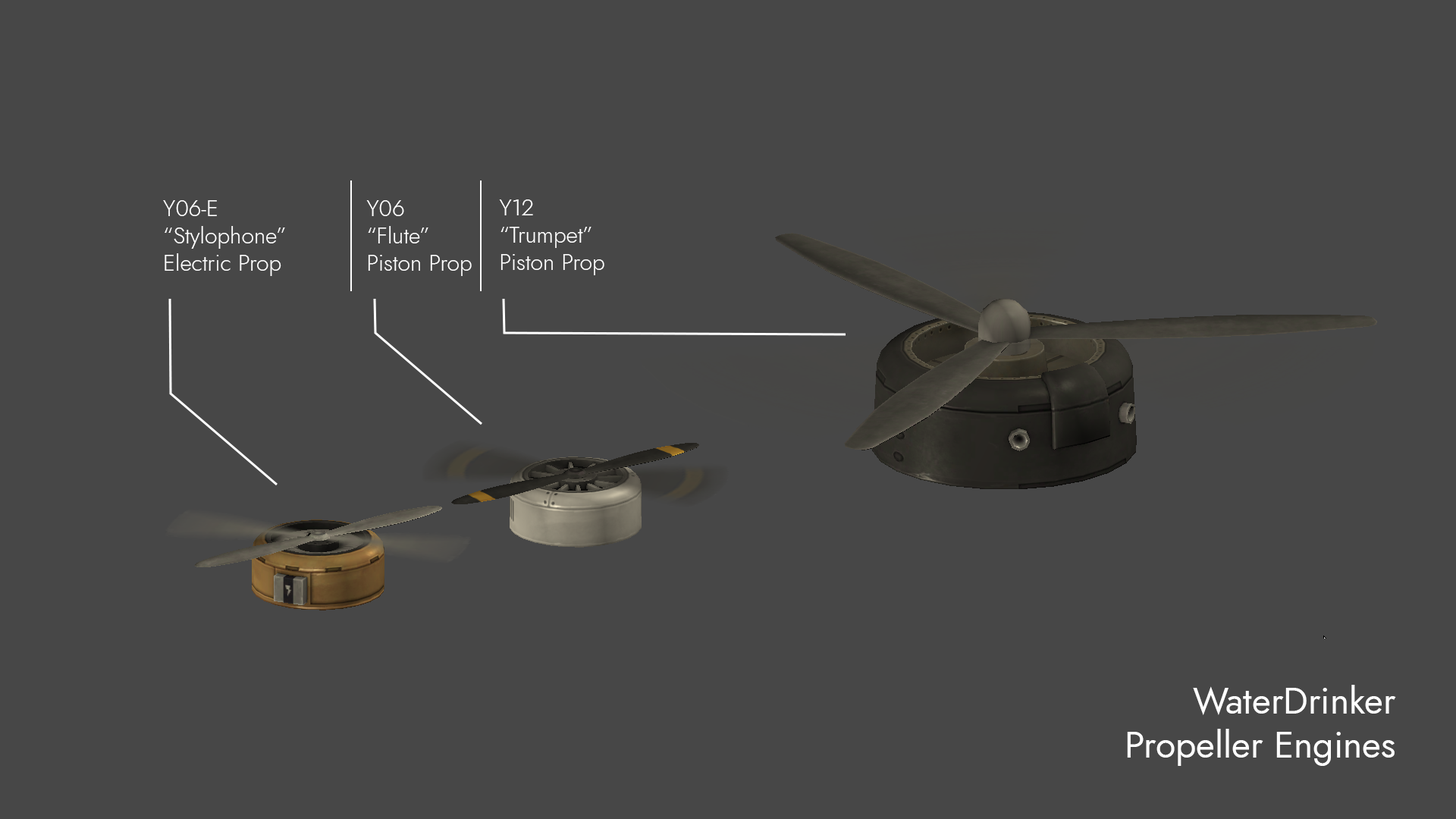
<style>
.page{position:relative;width:1456px;height:819px;background:#474747}
.page>*{position:absolute;margin:0}
.t1{font:22.7px "Renner-it-Light";color:#ffffff}
.t2{font:36.4px "Renner-it-Book";color:#ffffff}
</style>
<div class="page">
<p class="t1" style="left:163px;top:200px;width:122px;height:76px">Y06-E<br>“Stylophone”<br>Electric Prop</p>
<p class="t1" style="left:366px;top:200px;width:106px;height:76px">Y06<br>“Flute”<br>Piston Prop</p>
<p class="t1" style="left:499px;top:199px;width:105px;height:76px">Y12<br>“Trumpet”<br>Piston Prop</p>
<p class="t2" style="left:1127px;top:685px;width:269px;height:81px;text-align:right">WaterDrinker<br>Propeller Engines</p>
</div>
